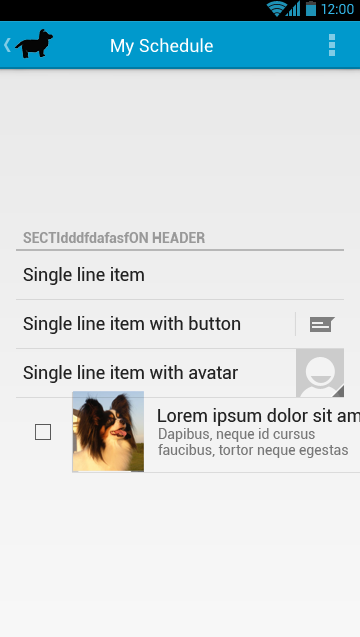
<style>
.page{position:relative;width:360px;height:637px}
.page>*{position:absolute;margin:0}
.t1{font:14px "Roboto-Regular";color:#33b5e5}
.t2{font:18px "Roboto-Regular";color:#ffffff}
.t3{font:14px "Roboto-Bold";color:#999999}
.t4{font:18px "Roboto-Regular";color:#222222}
.t5{font:14px/16px "Roboto-Regular";color:#777777}
</style>
<div class="page">
<p class="t1" style="left:321px;top:4px;width:33px;height:10px">12:00</p>
<p class="t2" style="left:111px;top:38px;width:102px;height:18px">My Schedule</p>
<p class="t3" style="left:23px;top:232px;width:182px;height:11px">SECTIdddfdafasfON HEADER</p>
<p class="t4" style="left:23px;top:267px;width:121px;height:18px">Single line item</p>
<p class="t4" style="left:23px;top:316px;width:218px;height:18px">Single line item with button</p>
<p class="t4" style="left:23px;top:365px;width:215px;height:18px">Single line item with avatar</p>
<p class="t5" style="left:158px;top:428px;width:190px;height:30px">Dapibus, neque id cursus <br>faucibus, tortor neque egestas</p>
</div>
